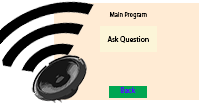
<style>
.page{position:relative;width:199px;height:106px;background:#ffebd4}
.page>*{position:absolute;margin:0}
.t1{font:6.3px "MyriadPro-Regular";color:#000000}
.t2{font:7.6px "MyriadPro-Regular";color:#000000}
.t3{font:7.6px "MyriadPro-Regular";color:#4d11f6}
</style>
<div class="page">
<p class="t1" style="left:109px;top:12px;width:38px;height:7px">Main Program</p>
<p class="t2" style="left:107px;top:36px;width:42px;height:7px">Ask Question</p>
<p class="t3" style="left:120px;top:87px;width:16px;height:6px">Back</p>
</div>
